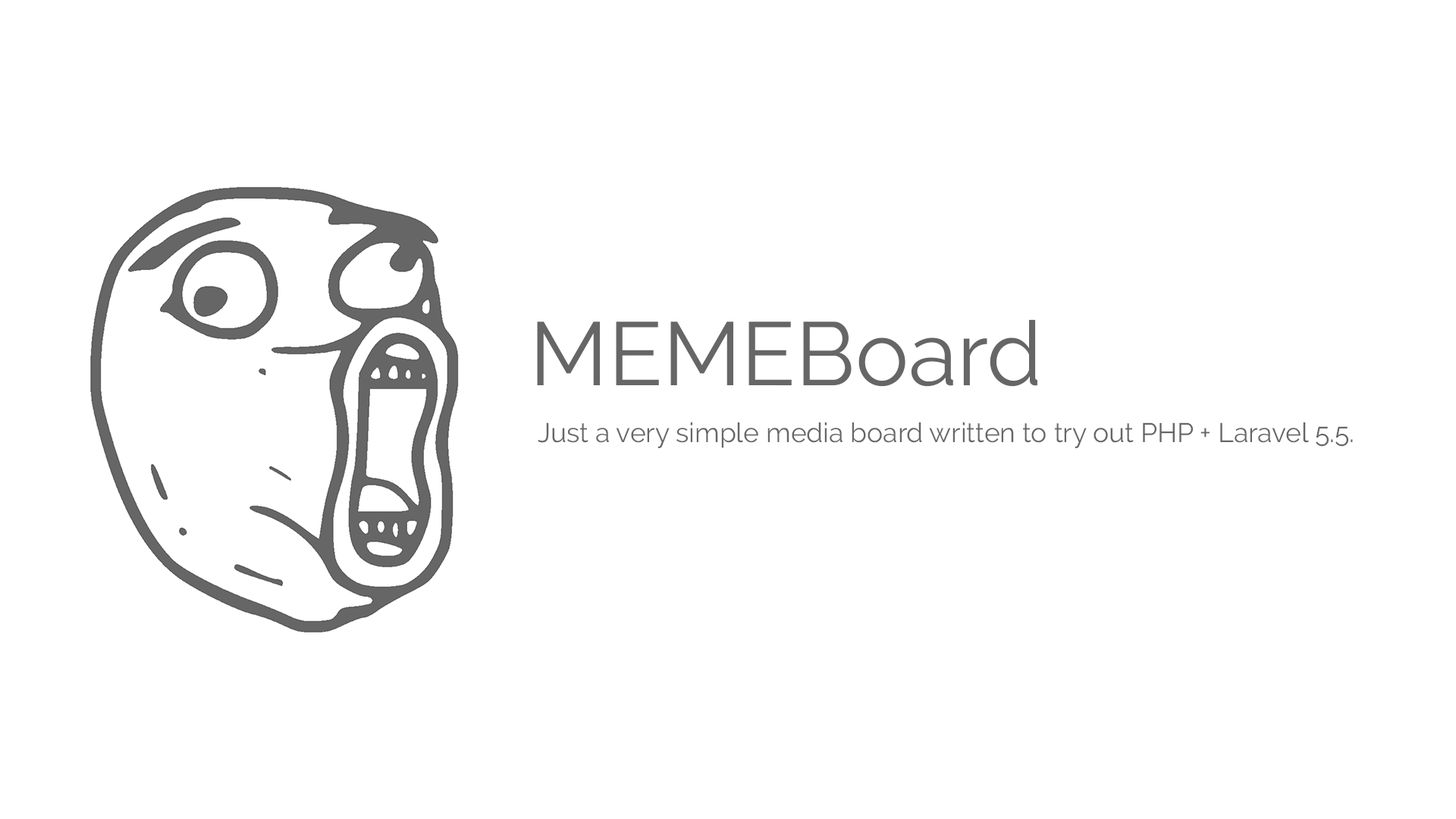
<style>
.page{position:relative;width:1456px;height:819px;background:#ffffff}
.page>*{position:absolute;margin:0}
.t1{font:89.6px "Raleway-Regular";color:#666666}
.t2{font:26.9px "Raleway-Regular";color:#666666}
</style>
<div class="page">
<p class="t1" style="left:537px;top:319px;width:500px;height:68px">MEMEBoard</p>
<p class="t2" style="left:538px;top:422px;width:815px;height:26px">Just a very simple media board written to try out PHP + Laravel 5.5.</p>
</div>
